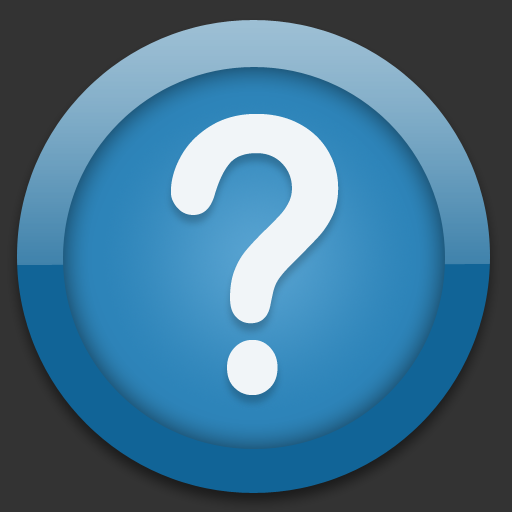
<style>
.page{position:relative;width:512px;height:512px;background:#333333}
.page>*{position:absolute;margin:0}
.t1{font:380px "ArialRoundedMTBold";color:#f1f5f8;scale:0.9 1}
</style>
<div class="page">
<p class="t1" style="left:171px;top:114px;width:168px;height:281px">?</p>
</div>
